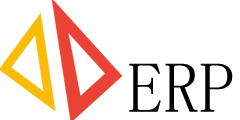
<style>
.page{position:relative;width:240px;height:120px;background:#ffffff}
.page>*{position:absolute;margin:0}
.t1{font:72px "YouYuan";color:#000000}
</style>
<div class="page">
<p class="t1" style="left:129px;top:63px;width:104px;height:49px">ERP</p>
</div>
